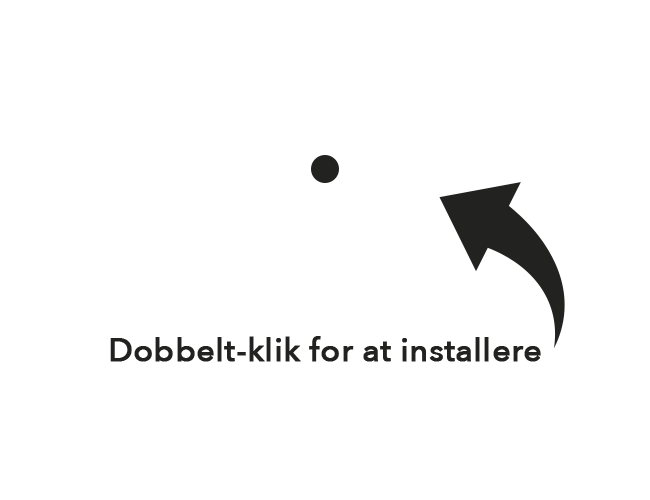
<style>
.page{position:relative;width:650px;height:500px;background:#ffffff}
.page>*{position:absolute;margin:0}
.t1{font:32px "AvenirNext-Medium";color:#222220;font-weight:bold}
</style>
<div class="page">
<p class="t1" style="left:110px;top:336px;width:431px;height:26px">Dobbelt-klik for at installere</p>
</div>
